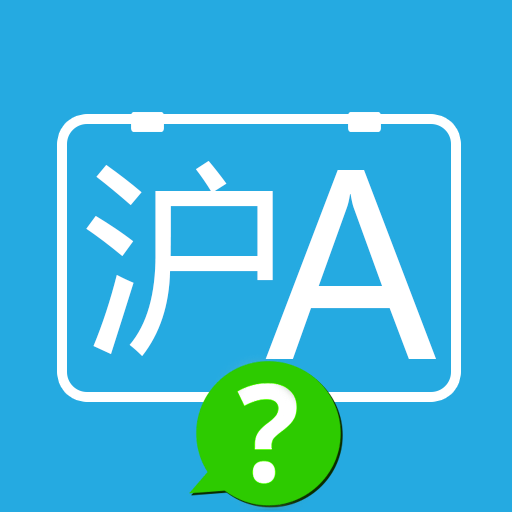
<style>
.page{position:relative;width:512px;height:512px;background:#25aae1}
.page>*{position:absolute;margin:0}
.t1{font:200px "MicrosoftYaHei";color:#ffffff}
.t2{font:3px "MicrosoftYaHei";color:#ffffff}
.t3{font:250px "MicrosoftYaHei";color:#ffffff}
</style>
<div class="page">
<p class="t1" style="left:86px;top:161px;width:201px;height:195px">沪<span class="t2">A</span></p>
<p class="t3" style="left:265px;top:170px;width:171px;height:189px">A</p>
</div>
